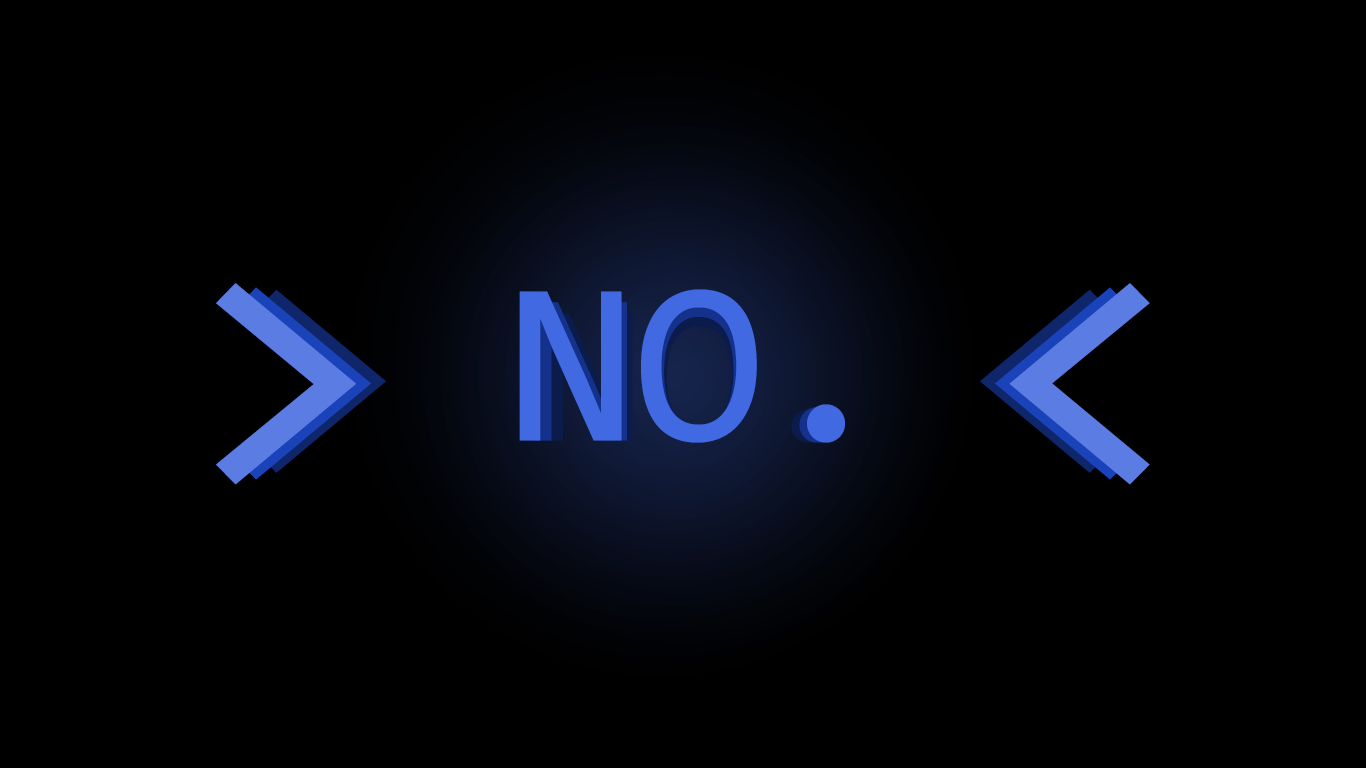
<style>
.page{position:relative;width:1366px;height:768px;background:#000000}
.page>*{position:absolute;margin:0}
.t1{font:366.7px "Consolas";color:#5a7ce3}
.t2{font:350px "Consolas"}
.t3{font:233.4px "Consolas";color:#4169e1}
.t4{font:216.7px "Consolas";color:#4169e1}
.t5{font:200px "Consolas"}
</style>
<div class="page">
<p class="t1" style="left:216px;top:283px;width:934px;height:202px">&gt;   &lt;</p>
<p class="t2" style="left:237px;top:287px;width:892px;height:193px">&gt;   &lt;</p>
<p class="t3" style="left:519px;top:289px;width:326px;height:154px">NO.</p>
<p class="t4" style="left:532px;top:300px;width:303px;height:143px">NO.</p>
<p class="t5" style="left:545px;top:311px;width:280px;height:132px">NO.</p>
</div>
